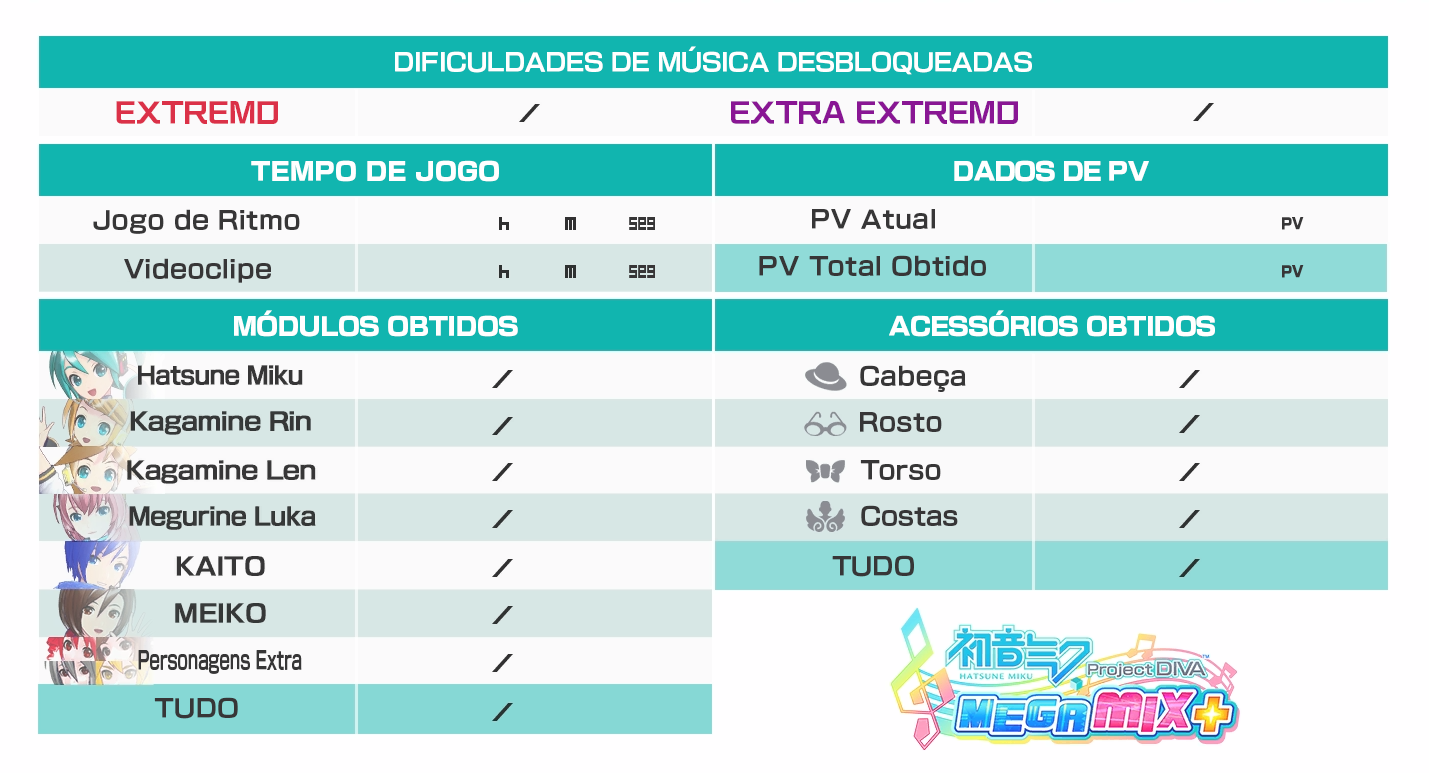
<style>
.page{position:relative;width:1430px;height:774px;background:#fbfafb}
.page>*{position:absolute;margin:0}
.t1{font:24px "NewRodinPro-B";letter-spacing:-0.011em;color:#ffffff}
.t2{font:25.3px "KafuTechnoStd-U";letter-spacing:0.019em;color:#db3148}
.t3{font:25.3px "KafuTechnoStd-U";letter-spacing:0.016em;color:#891694}
.t4{font:24px "NewRodinPro-EB";letter-spacing:0.024em;color:#ffffff}
.t5{font:24px "NewRodinPro-EB";letter-spacing:-0.026em;color:#ffffff}
.t6{font:24px "NewRodinPro-B";letter-spacing:0.026em;color:#373637}
.t7{font:18.7px "FOTBullheaded-CondensedRegular";color:#373637;scale:0.85 1}
.t8{font:14.7px "NewRodinPro-EB";letter-spacing:0.011em;color:#373637;scale:0.87 1}
.t9{font:24px "NewRodinPro-B";letter-spacing:0.031em;color:#373637}
.t10{font:24px "NewRodinPro-EB";letter-spacing:-0.002em;color:#ffffff}
.t11{font:24px "NewRodinPro-EB";letter-spacing:-0.007em;color:#ffffff}
.t12{font:24px "NewRodinPro-B";letter-spacing:0.022em;color:#373637}
.t13{font:24px "NewRodinPro-B";letter-spacing:0.016em;color:#373637}
.t14{font:24px "NewRodinPro-B";color:#373637}
.t15{font:24px "NewRodinPro-B";letter-spacing:0.014em;color:#373637}
.t16{font:24px "NewRodinPro-B";letter-spacing:0.012em;color:#373637;scale:0.61 1}
.t17{font:24px "NewRodinPro-B";letter-spacing:0.029em;color:#373637}
</style>
<div class="page">
<p class="t1" style="left:395px;top:46px;width:637px;height:29px">DIFICULDADES DE MÚSICA DESBLOQUEADAS</p>
<p class="t2" style="left:116px;top:101px;width:162px;height:23px">EXTREMO</p>
<p class="t3" style="left:731px;top:101px;width:287px;height:23px">EXTRA EXTREMO</p>
<p class="t4" style="left:251px;top:160px;width:248px;height:22px">TEMPO DE JOGO</p>
<p class="t5" style="left:954px;top:160px;width:195px;height:22px">DADOS DE PV</p>
<p class="t6" style="left:93px;top:209px;width:207px;height:25px">Jogo de Ritmo</p>
<p class="t6" style="left:812px;top:209px;width:123px;height:20px">PV Atual</p>
<p class="t7" style="left:629px;top:217px;width:26px;height:13px">seg</p>
<p class="t8" style="left:1282px;top:217px;width:22px;height:13px">PV</p>
<p class="t9" style="left:759px;top:255px;width:227px;height:21px">PV Total Obtido</p>
<p class="t6" style="left:124px;top:258px;width:147px;height:25px">Videoclipe</p>
<p class="t7" style="left:629px;top:265px;width:26px;height:13px">seg</p>
<p class="t8" style="left:1282px;top:265px;width:22px;height:13px">PV</p>
<p class="t10" style="left:234px;top:310px;width:284px;height:27px">MÓDULOS OBTIDOS</p>
<p class="t11" style="left:889px;top:310px;width:326px;height:27px">ACESSÓRIOS OBTIDOS</p>
<p class="t12" style="left:860px;top:365px;width:106px;height:27px">Cabeça</p>
<p class="t6" style="left:860px;top:412px;width:82px;height:20px">Rosto</p>
<p class="t13" style="left:860px;top:460px;width:81px;height:20px">Torso</p>
<p class="t14" style="left:861px;top:505px;width:97px;height:21px">Costas</p>
<p class="t15" style="left:832px;top:555px;width:82px;height:22px">TUDO</p>
<p class="t16" style="left:138px;top:650px;width:164px;height:24px">Personagens Extra</p>
<p class="t17" style="left:154px;top:697px;width:84px;height:22px">TUDO</p>
</div>
